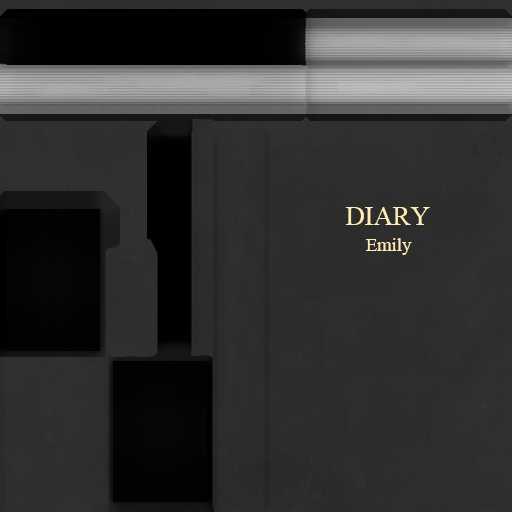
<style>
.page{position:relative;width:512px;height:512px}
.page>*{position:absolute;margin:0}
.t1{font:26.7px "TimesNewRomanPSMT";color:#ffecb5}
.t2{font:18.7px "TimesNewRomanPSMT";color:#ffecb5}
</style>
<div class="page">
<p class="t1" style="left:345px;top:207px;width:85px;height:18px">DIARY</p>
<p class="t2" style="left:366px;top:238px;width:46px;height:17px">Emily</p>
</div>
